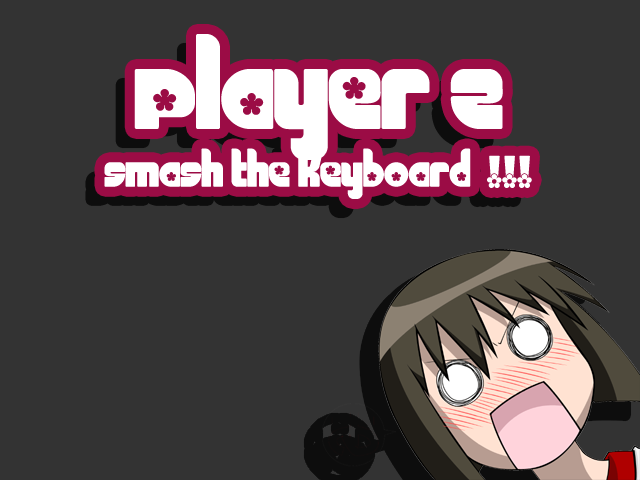
<style>
.page{position:relative;width:640px;height:480px;background:#333333}
.page>*{position:absolute;margin:0}
.t1{font:48px "Chick";color:#ffffff}
.t2{font:120px "Chick";color:#ffffff}
</style>
<div class="page">
<p class="t1" style="left:104px;top:34px;width:428px;height:165px;text-align:center"><span class="t2">Player 2<br></span>smash the keyboard  !!!</p>
</div>
